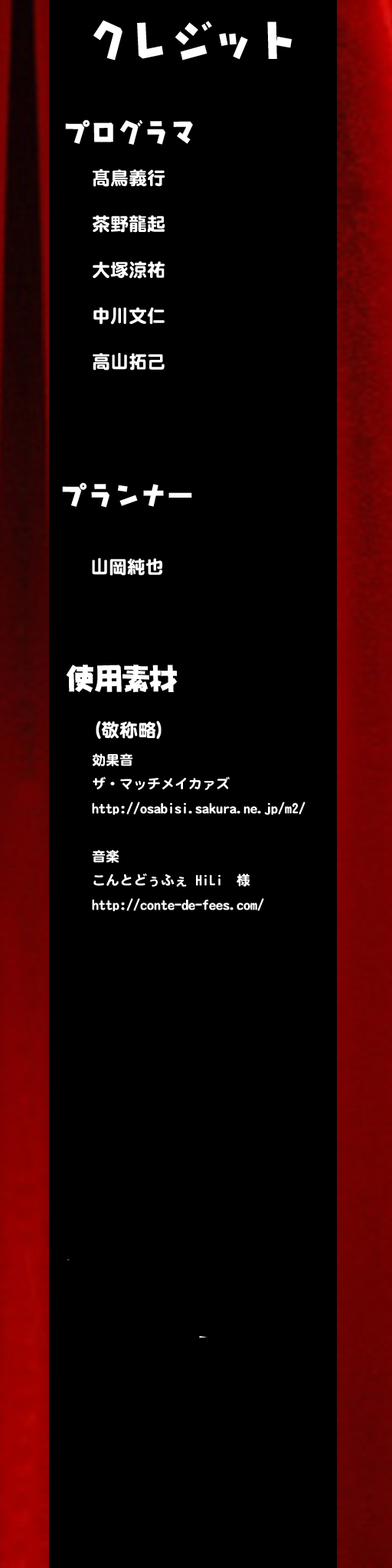
<style>
.page{position:relative;width:392px;height:1568px;background:#000000}
.page>*{position:absolute;margin:0}
.t1{font:18.4px/45.9px "DFMaruGothic_U-SB-WIN-RKSJ-H";color:#ffffff}
.t2{font:18.4px "DFMaruGothic_U-SB-WIN-RKSJ-H";color:#ffffff}
.t3{font:27.9px "NIS-JYA-U-83pv-RKSJ-H";color:#ffffff}
.t4{font:13.8px "DFMaruGothic-SB-WIN-RKSJ-H";color:#ffffff}
.t5{font:18.4px "DFMaruGothic-SB-WIN-RKSJ-H";color:#ffffff}
</style>
<div class="page">
<p class="t1" style="left:93px;top:168px;width:72px;height:203px">髙鳥義行<br>茶野龍起<br>大塚涼祐<br>中川文仁<br>高山拓己</p>
<p class="t2" style="left:92px;top:558px;width:70px;height:18px">山岡純也</p>
<p class="t3" style="left:66px;top:665px;width:112px;height:28px">使用素材</p>
<p class="t4" style="left:92px;top:720px;width:213px;height:192px"><span class="t5">(敬称略)<br></span>効果音<br>ザ・マッチメイカァズ<br>http://osabisi.sakura.ne.jp/m2/<br><br>音楽<br>こんとどぅふぇ HiLi　様<br>http://conte-de-fees.com/</p>
</div>
